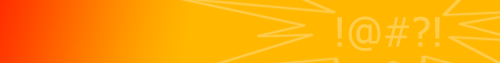
<style>
.page{position:relative;width:500px;height:63px;background:#ffb700}
.page>*{position:absolute;margin:0}
.t1{font:40px "Tahoma";color:#ffcd4d}
</style>
<div class="page">
<p class="t1" style="left:337px;top:16px;width:103px;height:35px">!@#?!</p>
</div>
